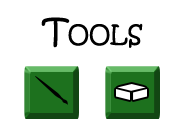
<style>
.page{position:relative;width:184px;height:137px;background:#ffffff}
.page>*{position:absolute;margin:0}
.t1{font:34px "KristenITC-Regular";color:#000000;font-variant:small-caps}
</style>
<div class="page">
<p class="t1" style="left:41px;top:17px;width:102px;height:31px">Tools</p>
</div>
